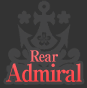
<style>
.page{position:relative;width:87px;height:88px;background:#333333}
.page>*{position:absolute;margin:0}
.t1{font:24px/12px "RyuminPro-ExBold";letter-spacing:-0.08em;color:#ff4d51;scale:0.9 1}
.t2{font:15px/12px "RyuminPro-ExBold";letter-spacing:-0.08em;color:#ff4d51;scale:0.9 1}
</style>
<div class="page">
<p class="t1" style="left:6px;top:50px;width:76px;height:32px;text-align:center"><span class="t2">Rear<br></span>Admiral</p>
</div>
